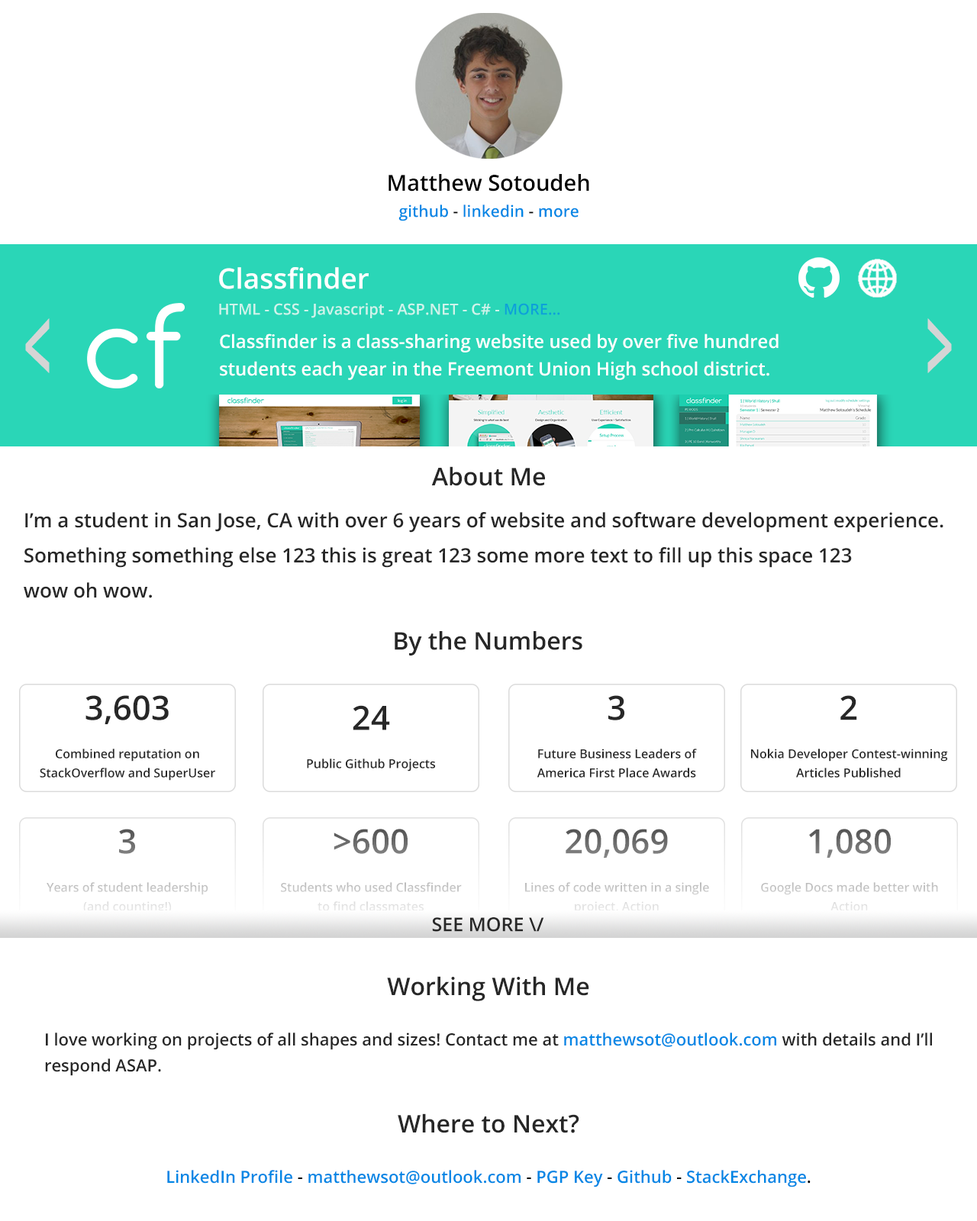
<style>
.page{position:relative;width:977px;height:1221px;background:#ffffff}
.page>*{position:absolute;margin:0}
.t1{font:22.1px "OpenSans-Semibold";color:#000000}
.t2{font:16px "OpenSans-Semibold";color:#0087e5}
.t3{font:16px "OpenSans-Semibold";color:#000000}
.t4{font:28.2px "OpenSans-Semibold";color:#ffffff}
.t5{font:15.3px "OpenSans-Semibold";color:#cff3eb}
.t6{font:107.4px "OpenSans-Semibold";color:#d5d5d5;scale:0.45 1}
.t7{font:18.3px/27.5px "OpenSans-Semibold";color:#ffffff}
.t8{font:24.4px "OpenSans-Semibold";color:#262626}
.t9{font:19.8px/35.1px "OpenSans-Semibold";color:#272727}
.t10{font:24.4px "OpenSans-Semibold";color:#272727}
.t11{font:12.2px/19.1px "OpenSans-Semibold";color:#272727}
.t12{font:33.6px/35.1px "OpenSans-Semibold";color:#272727}
.t13{font:12.2px/19.1px "OpenSans-Semibold"}
.t14{font:33.6px/35.1px "OpenSans-Semibold"}
.t15{font:19.1px "OpenSans-Semibold";color:#272727}
.t16{font:16.8px/26px "OpenSans-Semibold";color:#272727}
.t17{font:16.8px/26px "OpenSans-Semibold";color:#0087e5}
.t18{font:16.8px "OpenSans-Semibold";color:#0087e5}
.t19{font:16.8px "OpenSans-Semibold";color:#000000}
</style>
<div class="page">
<p class="t1" style="left:388px;top:174px;width:201px;height:18px">Matthew Sotoudeh</p>
<p class="t2" style="left:398px;top:204px;width:180px;height:17px">github <span class="t3">- </span>linkedin <span class="t3">- </span>more</p>
<p class="t4" style="left:219px;top:267px;width:150px;height:22px">Classfinder</p>
<p class="t5" style="left:219px;top:303px;width:341px;height:15px">HTML - CSS - Javascript - ASP.NET - C# - MORE...</p>
<p class="t6" style="left:25px;top:318px;width:25px;height:55px">&lt;</p>
<p class="t6" style="left:927px;top:318px;width:25px;height:55px">&gt;</p>
<p class="t7" style="left:220px;top:333px;width:558px;height:47px">Classfinder is a class-sharing website used by over five hundred<br>students each year in the Freemont Union High school district.</p>
<p class="t8" style="left:431px;top:466px;width:114px;height:20px">About Me</p>
<p class="t9" style="left:24px;top:512px;width:919px;height:86px">I’m a student in San Jose, CA with over 6 years of website and software development experience.<br>Something something else 123 this is great 123 some more text to fill up this space 123<br>wow oh wow.</p>
<p class="t10" style="left:394px;top:631px;width:188px;height:24px">By the Numbers</p>
<p class="t11" style="left:40px;top:695px;width:175px;height:86px;text-align:center"><span class="t12">3,603<br></span><br>Combined reputation on<br>StackOverflow and SuperUser</p>
<p class="t11" style="left:536px;top:695px;width:161px;height:83px;text-align:center"><span class="t12">3<br></span><br>Future Business Leaders of<br>America First Place Awards</p>
<p class="t11" style="left:751px;top:695px;width:197px;height:83px;text-align:center"><span class="t12">2<br></span><br>Nokia Developer Contest-winning<br>Articles Published</p>
<p class="t11" style="left:307px;top:705px;width:128px;height:66px;text-align:center"><span class="t12">24<br></span><br>Public Github Projects</p>
<p class="t13" style="left:47px;top:829px;width:161px;height:85px;text-align:center"><span class="t14">3<br></span><br>Years of student leadership<br>(and counting!)</p>
<p class="t13" style="left:281px;top:829px;width:181px;height:82px;text-align:center"><span class="t14">&gt;600<br></span><br>Students who used Classfinder<br>to find classmates</p>
<p class="t13" style="left:525px;top:829px;width:184px;height:85px;text-align:center"><span class="t14">20,069<br></span><br>Lines of code written in a single<br>project, Action</p>
<p class="t13" style="left:761px;top:829px;width:177px;height:82px;text-align:center"><span class="t14">1,080<br></span><br>Google Docs made better with<br>Action</p>
<p class="t15" style="left:432px;top:917px;width:112px;height:15px">SEE MORE \/</p>
<p class="t10" style="left:387px;top:976px;width:202px;height:25px">Working With Me</p>
<p class="t16" style="left:45px;top:1032px;width:887px;height:44px">I love working on projects of all shapes and sizes! Contact me at <span class="t17">matthewsot@outlook.com </span>with details and I’ll<br>respond ASAP.</p>
<p class="t10" style="left:398px;top:1113px;width:181px;height:20px">Where to Next?</p>
<p class="t18" style="left:167px;top:1170px;width:643px;height:17px">LinkedIn Profile <span class="t19">- </span>matthewsot@outlook.com <span class="t19">- </span>PGP Key<span class="t19"> - </span>Github<span class="t19"> - </span>StackExchange<span class="t19">.</span></p>
</div>
